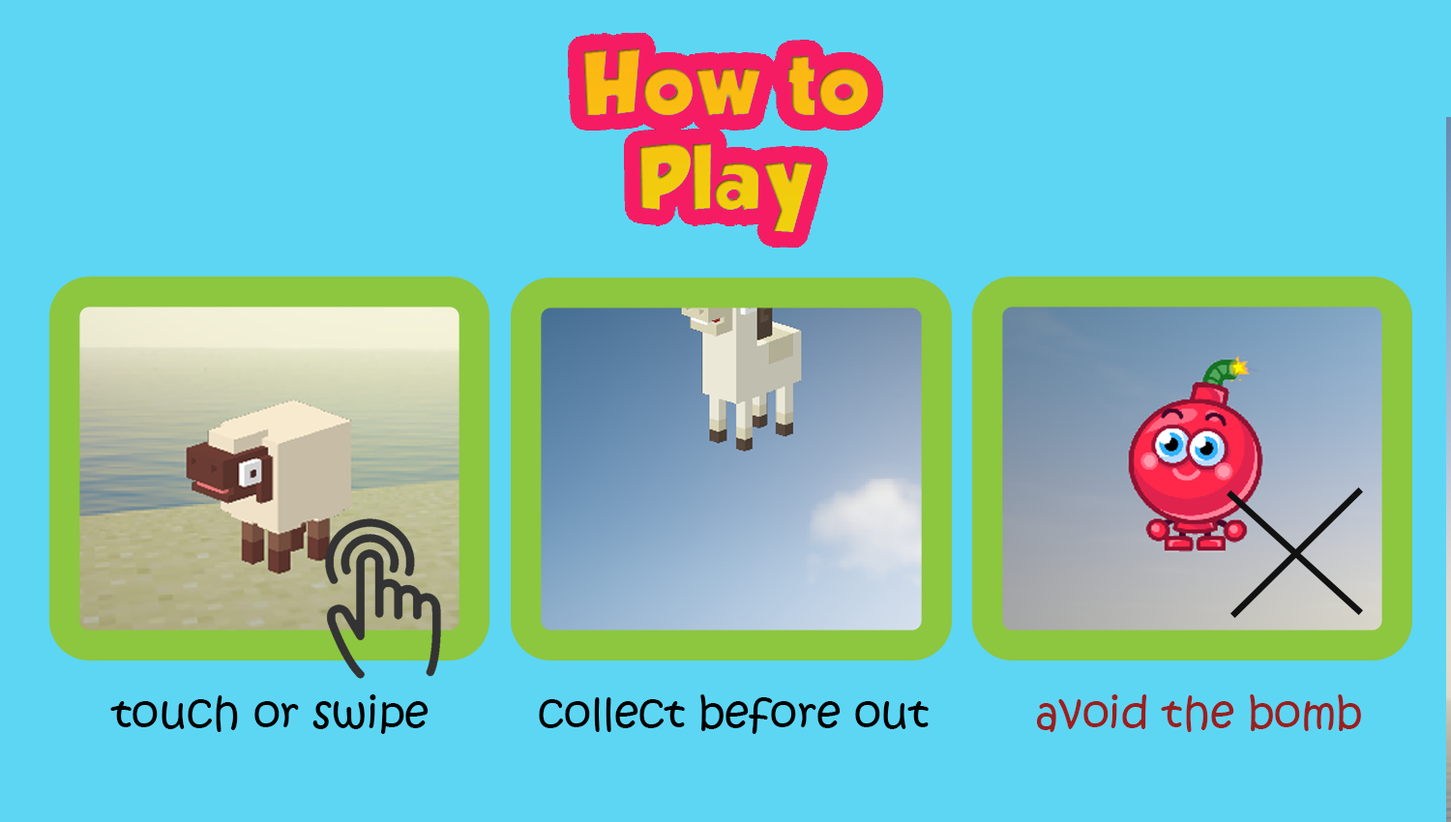
<style>
.page{position:relative;width:1451px;height:822px;background:#5dd6f4}
.page>*{position:absolute;margin:0}
.t1{font:43.5px "KristenITC-Regular";color:#010101}
.t2{font:43.5px "KristenITC-Regular";color:#000000}
.t3{font:43.5px "KristenITC-Regular";color:#992020}
</style>
<div class="page">
<p class="t1" style="left:110px;top:694px;width:318px;height:40px">touch or swipe</p>
<p class="t2" style="left:539px;top:694px;width:389px;height:40px">collect before out</p>
<p class="t3" style="left:1037px;top:694px;width:324px;height:38px">avoid the bomb</p>
</div>
